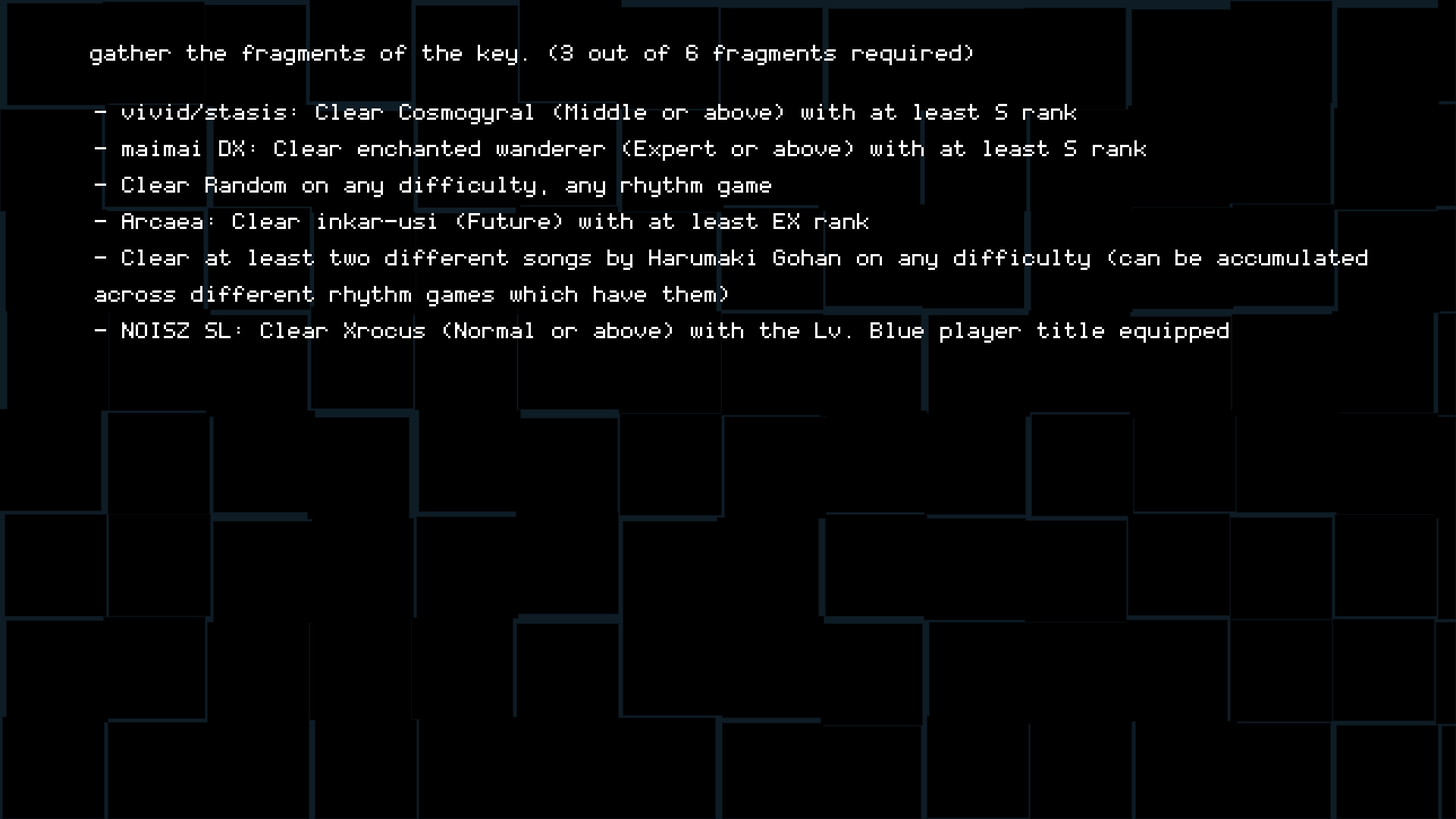
<style>
.page{position:relative;width:1456px;height:819px;background:#000000}
.page>*{position:absolute;margin:0}
.t1{font:36.4px "Coder's-Crux";color:#ffffff}
.t2{font:36.4px/36.4px "Coder's-Crux";color:#ffffff}
</style>
<div class="page">
<p class="t1" style="left:90px;top:45px;width:882px;height:20px">gather the fragments of the key. (3 out of 6 fragments required)</p>
<p class="t2" style="left:95px;top:104px;width:1272px;height:239px">- vivid/stasis: Clear Cosmogyral (Middle or above) with at least S rank<br>- maimai DX: Clear enchanted wanderer (Expert or above) with at least S rank<br>- Clear Random on any difficulty, any rhythm game<br>- Arcaea: Clear inkar-usi (Future) with at least EX rank<br>- Clear at least two different songs by Harumaki Gohan on any difficulty (can be accumulated <br>across different rhythm games which have them)<br>- NOISZ SL: Clear Xrocus (Normal or above) with the Lv. Blue player title equipped</p>
</div>
